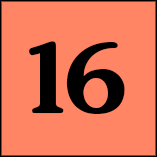
<style>
.page{position:relative;width:157px;height:157px;background:#ff8565}
.page>*{position:absolute;margin:0}
.t1{font:110px "ARJULIAN";color:#000000}
</style>
<div class="page">
<p class="t1" style="left:29px;top:41px;width:96px;height:73px">16</p>
</div>
